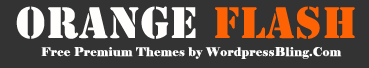
<style>
.page{position:relative;width:369px;height:68px;background:#333333}
.page>*{position:absolute;margin:0}
.t1{font:41px "StencilStd";letter-spacing:0.025em;color:#fffefd}
.t2{font:41px "StencilStd";letter-spacing:0.025em;color:#fd6204}
.t3{font:12px "Elephant-Regular";letter-spacing:0.025em;color:#fefdfd}
</style>
<div class="page">
<p class="t1" style="left:16px;top:6px;width:339px;height:33px">orange<span class="t2"> flash</span></p>
<p class="t3" style="left:41px;top:47px;width:301px;height:12px">Free Premium Themes by WordpressBling.Com</p>
</div>
